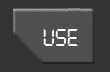
<style>
.page{position:relative;width:110px;height:72px;background:#333333}
.page>*{position:absolute;margin:0}
.t1{font:26px "DS-Digital";letter-spacing:-0.025em;color:#ffffff}
</style>
<div class="page">
<p class="t1" style="left:43px;top:29px;width:35px;height:17px">use</p>
</div>
